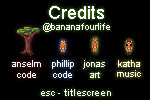
<style>
.page{position:relative;width:150px;height:100px;background:#000000}
.page>*{position:absolute;margin:0}
.t1{font:9px "ArialMT";color:#ffffff}
.t2{font:18px "ArialMT";color:#ffffff}
.t3{font:10px "ArialMT";color:#ffffff}
</style>
<div class="page">
<p class="t1" style="left:43px;top:6px;width:67px;height:26px;text-align:center"><span class="t2">Credits<br></span>@bananafourlife</p>
<p class="t1" style="left:12px;top:60px;width:29px;height:18px;text-align:center">anselm<br>code</p>
<p class="t1" style="left:52px;top:60px;width:22px;height:18px;text-align:center">phillip<br>code</p>
<p class="t1" style="left:83px;top:60px;width:22px;height:18px;text-align:center">jonas<br>art</p>
<p class="t1" style="left:117px;top:60px;width:24px;height:17px;text-align:center">katha<br>music</p>
<p class="t3" style="left:41px;top:89px;width:70px;height:7px">esc - titlescreen</p>
</div>
